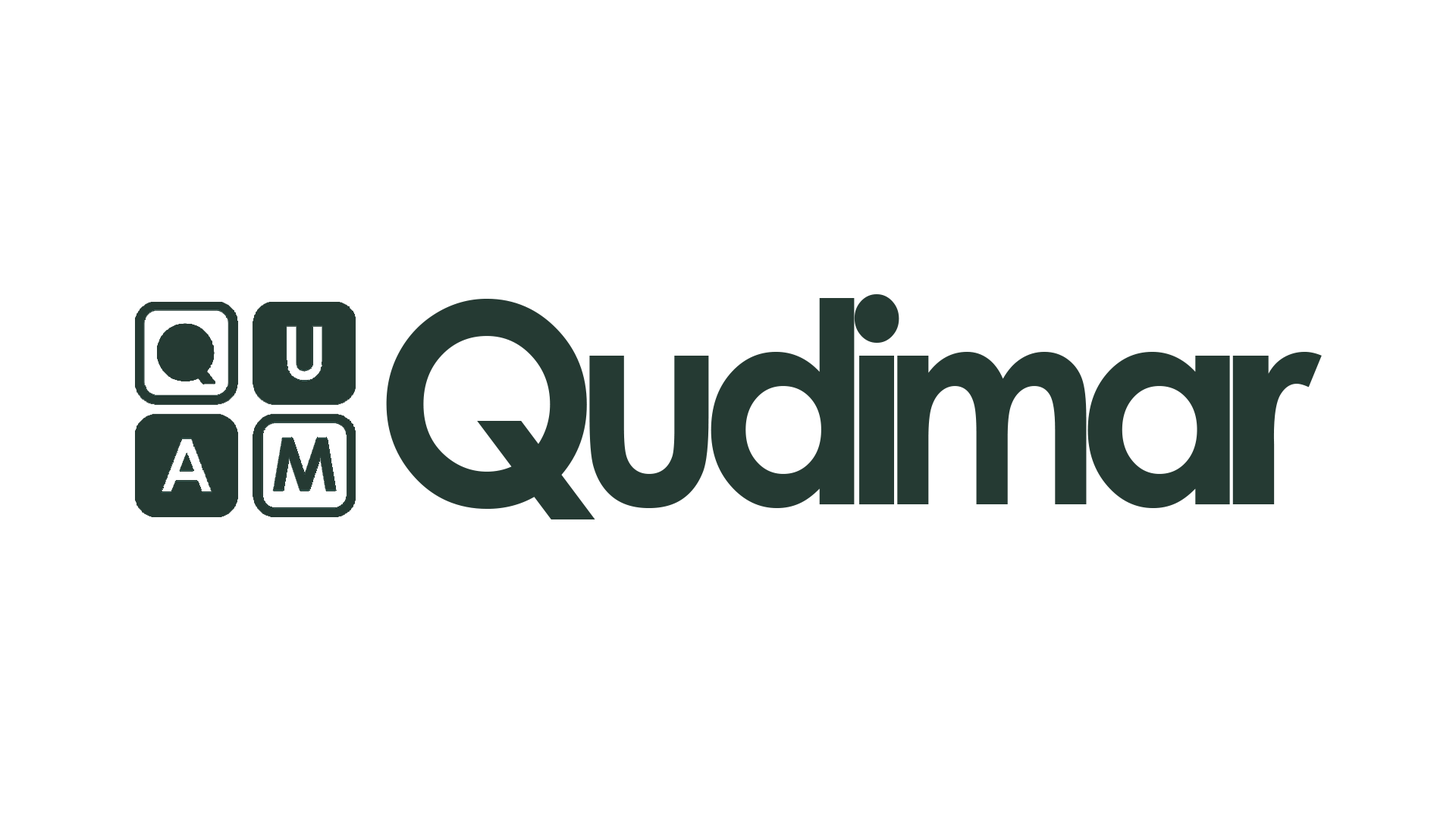
<style>
.page{position:relative;width:1456px;height:819px;background:#ffffff}
.page>*{position:absolute;margin:0}
.t1{font:280.1px "CenturyGothic-Bold";letter-spacing:-0.1em;color:#253a33;scale:0.93 1}
.t2{font:280.1px "CenturyGothic-Bold";letter-spacing:-0.1em;color:#253a33;scale:0.96 1}
.t3{font:280.1px "CenturyGothic-Bold";letter-spacing:-0.1em;color:#253a33;scale:0.91 1}
.t4{font:280.1px "CenturyGothic-Bold";letter-spacing:-0.1em;color:#253a33;scale:0.83 1}
.t5{font:280.1px "CenturyGothic-Bold";letter-spacing:-0.1em;color:#253a33;scale:0.92 1}
.t6{font:280.1px "CenturyGothic-Bold";letter-spacing:-0.1em;color:#253a33;scale:1.11 1}
</style>
<div class="page">
<p class="t1" style="left:386px;top:294px;width:936px;height:225px"><span class="t2">Q</span><span class="t3">u</span>di<span class="t4">m</span><span class="t5">a</span><span class="t6">r</span></p>
</div>
